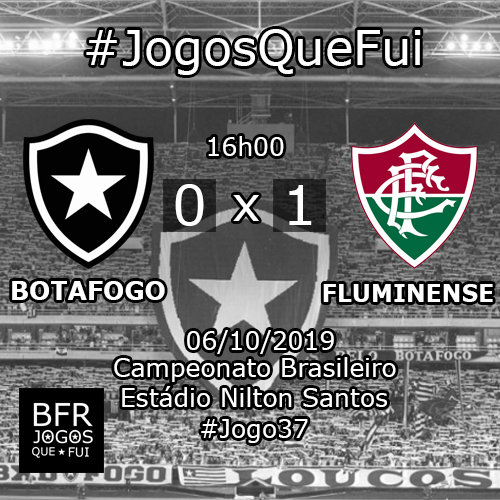
<style>
.page{position:relative;width:500px;height:500px}
.page>*{position:absolute;margin:0}
.t1{font:48px "Verdana";color:#ffffff}
.t2{font:25px "Verdana";color:#ffffff}
.t3{font:54.9px "Verdana";color:#ffffff}
.t4{font:55.3px "Verdana";color:#ffffff}
.t5{font:25px "Verdana-Bold";color:#ffffff}
.t6{font:23.6px "Verdana-Bold";color:#ffffff}
</style>
<div class="page">
<p class="t1" style="left:86px;top:29px;width:335px;height:46px">#JogosQueFui</p>
<p class="t2" style="left:208px;top:136px;width:76px;height:20px">16h00</p>
<p class="t3" style="left:175px;top:184px;width:29px;height:42px">0</p>
<p class="t4" style="left:289px;top:185px;width:23px;height:40px">1</p>
<p class="t1" style="left:233px;top:195px;width:26px;height:26px">x</p>
<p class="t5" style="left:12px;top:281px;width:153px;height:19px">BOTAFOGO</p>
<p class="t6" style="left:323px;top:284px;width:170px;height:18px">FLUMINENSE</p>
<p class="t2" style="left:187px;top:330px;width:147px;height:24px">06/10/2019</p>
<p class="t2" style="left:114px;top:357px;width:282px;height:25px">Campeonato Brasileiro</p>
<p class="t2" style="left:122px;top:386px;width:265px;height:21px">Estádio Nilton Santos</p>
<p class="t2" style="left:201px;top:419px;width:107px;height:24px">#Jogo37</p>
</div>
